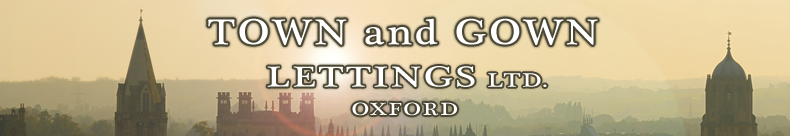
<style>
.page{position:relative;width:790px;height:136px}
.page>*{position:absolute;margin:0}
.t1{font:36.8px "PlantagenetCherokee";letter-spacing:0.07em;color:#ffffff;scale:1.14 1}
.t2{font:29.4px "PlantagenetCherokee";letter-spacing:0.07em;color:#ffffff;scale:1.31 1}
.t3{font:20px "PlantagenetCherokee";letter-spacing:0.07em;color:#ffffff;scale:1.31 1}
.t4{font:18px "PlantagenetCherokee";letter-spacing:0.07em;color:#ffffff;scale:1.31 1}
</style>
<div class="page">
<p class="t1" style="left:208px;top:18px;width:390px;height:27px">TOWN and GOWN</p>
<p class="t2" style="left:267px;top:66px;width:208px;height:21px">LETTINGS</p>
<p class="t3" style="left:488px;top:73px;width:59px;height:14px">LTD.</p>
<p class="t4" style="left:352px;top:102px;width:105px;height:14px">OXFORD</p>
</div>
